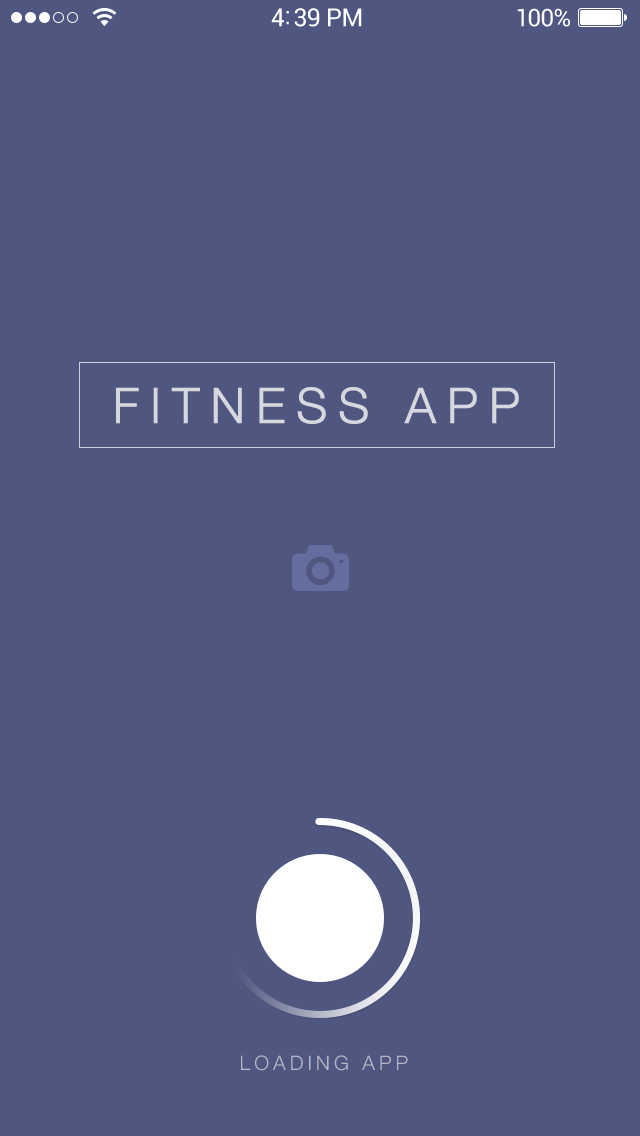
<style>
.page{position:relative;width:640px;height:1136px;background:#4f5680}
.page>*{position:absolute;margin:0}
.t1{font:49px "HelveticaNeue-Light";letter-spacing:0.2em;color:#d6d7df;font-weight:bold}
.t2{font:20px "HelveticaNeue-Light";letter-spacing:0.2em;color:#b5b7c6;text-transform:uppercase}
</style>
<div class="page">
<p class="t1" style="left:116px;top:387px;width:403px;height:37px">FITNESS APP</p>
<p class="t2" style="left:241px;top:1055px;width:167px;height:16px">Loading app</p>
</div>
